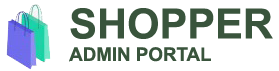
<style>
.page{position:relative;width:279px;height:71px;background:#ffffff}
.page>*{position:absolute;margin:0}
.t1{font:18.8px "Arial-BoldMT";color:#39543c}
.t2{font:41.7px "Arial-BoldMT";color:#39543c}
.t3{font:0.4px "ArialMT";color:#39543c}
</style>
<div class="page">
<p class="t1" style="left:69px;top:8px;width:204px;height:54px"><span class="t2">SHOPPER</span><br>ADMIN PORTAL<br><span class="t3">AD</span></p>
</div>
